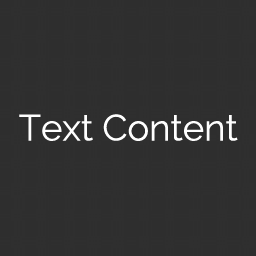
<style>
.page{position:relative;width:256px;height:256px;background:#2e2e2e}
.page>*{position:absolute;margin:0}
.t1{font:36.5px "Raleway-Regular";color:#ffffff}
</style>
<div class="page">
<p class="t1" style="left:19px;top:114px;width:219px;height:27px">Text Content</p>
</div>
